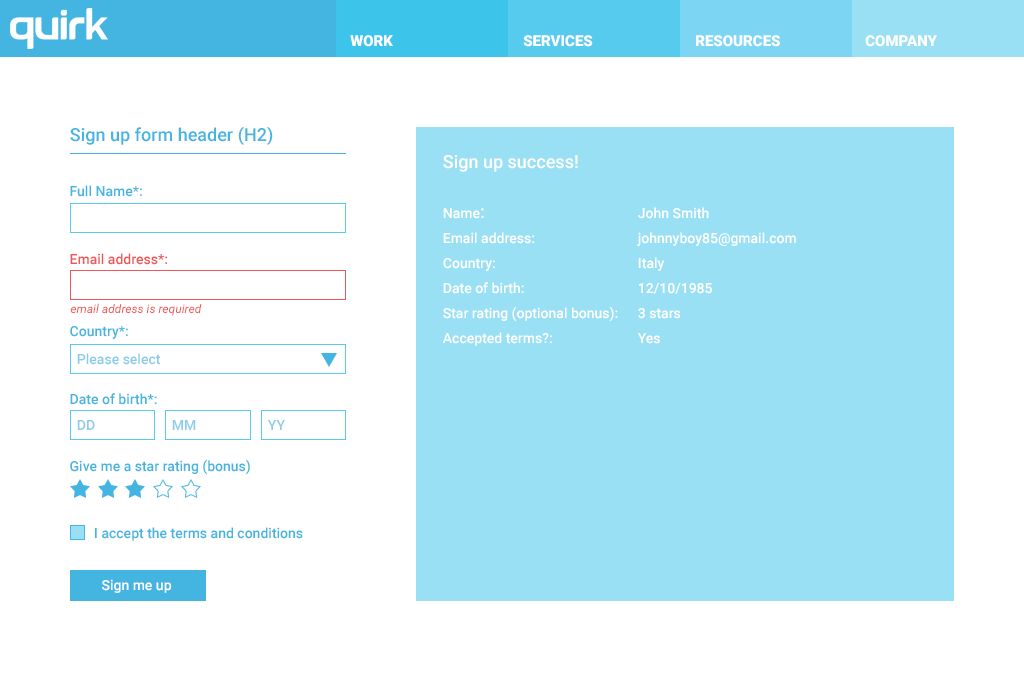
<style>
.page{position:relative;width:1024px;height:700px;background:#ffffff}
.page>*{position:absolute;margin:0}
.t1{font:15px "Roboto-Black";color:#ffffff}
.t2{font:18px "Roboto-Medium";color:#44b4e1}
.t3{font:14px/25px "Roboto-Medium";color:#ffffff}
.t4{font:18px/25px "Roboto-Medium";color:#ffffff}
.t5{font:14px "Roboto-Medium";color:#44b4e1}
.t6{font:14px/18px "Roboto-Medium";color:#ee5757}
.t7{font:14px/18px "Roboto-Medium";color:#44b4e1}
.t8{font:12px "Roboto-Italic";color:#ee5757}
.t9{font:14px "Roboto-Medium";color:#8cccea}
.t10{font:14px "Roboto-Medium";color:#ffffff}
</style>
<div class="page">
<p class="t1" style="left:350px;top:35px;width:43px;height:12px">WORK</p>
<p class="t1" style="left:523px;top:35px;width:70px;height:12px">SERVICES</p>
<p class="t1" style="left:696px;top:35px;width:84px;height:12px">RESOURCES</p>
<p class="t1" style="left:865px;top:35px;width:72px;height:12px">COMPANY</p>
<p class="t2" style="left:70px;top:126px;width:203px;height:19px">Sign up form header (H2)</p>
<p class="t3" style="left:442px;top:155px;width:176px;height:191px"><span class="t4">Sign up success!<br></span><br>Name<span class="t4">:</span><br>Email address:<br>Country:<br>Date of birth:<br>Star rating (optional bonus):<br>Accepted terms?:</p>
<p class="t5" style="left:70px;top:185px;width:233px;height:356px">Full Name*:<br><br><br><br><span class="t6">Email address*:<br></span><span class="t7"><br><br><br>Country*:<br></span><br><br><br>Date of birth*:<br><br><br><br>Give me a star rating (bonus)<br><br><br><br>       I accept the terms and conditions</p>
<p class="t3" style="left:637px;top:207px;width:159px;height:137px"><span class="t4"><br></span><br>John Smith<br>johnnyboy85@gmail.com<br>Italy<br>12/10/1985<br>3 stars<br>Yes</p>
<p class="t8" style="left:70px;top:303px;width:132px;height:13px">email address is required</p>
<p class="t9" style="left:77px;top:353px;width:83px;height:12px">Please select</p>
<p class="t9" style="left:77px;top:420px;width:18px;height:10px">DD</p>
<p class="t9" style="left:172px;top:420px;width:24px;height:10px">MM</p>
<p class="t9" style="left:267px;top:420px;width:18px;height:10px">YY</p>
<p class="t10" style="left:102px;top:579px;width:70px;height:14px">Sign me up</p>
</div>
